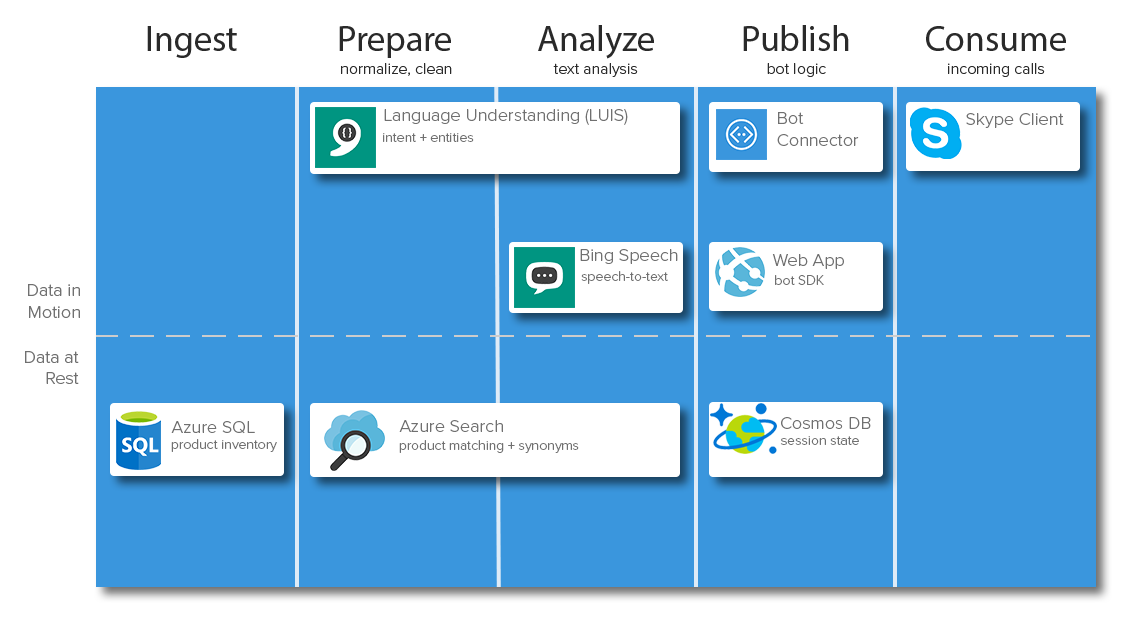
<style>
.page{position:relative;width:1139px;height:630px;background:#3a96dd}
.page>*{position:absolute;margin:0}
.t1{font:36px "MyriadPro-Regular";color:#2a2a2a}
.t2{font:16px "ProximaNova-Light";color:#2a2a2a}
.t3{font:18px "ProximaNova-Light";color:#707070}
.t4{font:14px "ProximaNova-Light";color:#707070}
</style>
<div class="page">
<p class="t1" style="left:147px;top:26px;width:90px;height:32px">Ingest</p>
<p class="t1" style="left:339px;top:26px;width:112px;height:32px">Prepare</p>
<p class="t1" style="left:538px;top:25px;width:116px;height:34px">Analyze</p>
<p class="t1" style="left:743px;top:25px;width:106px;height:26px">Publish</p>
<p class="t1" style="left:926px;top:26px;width:140px;height:25px">Consume</p>
<p class="t2" style="left:341px;top:63px;width:111px;height:13px">normalize, clean</p>
<p class="t2" style="left:553px;top:63px;width:85px;height:14px">text analysis</p>
<p class="t2" style="left:767px;top:63px;width:59px;height:14px">bot logic</p>
<p class="t2" style="left:948px;top:63px;width:97px;height:14px">incoming calls</p>
<p class="t3" style="left:384px;top:109px;width:244px;height:16px">Language Understanding (LUIS)</p>
<p class="t3" style="left:777px;top:112px;width:82px;height:34px">Bot<br>Connector</p>
<p class="t3" style="left:966px;top:113px;width:98px;height:15px">Skype Client</p>
<p class="t4" style="left:383px;top:133px;width:91px;height:9px">intent + entities</p>
<p class="t3" style="left:580px;top:249px;width:98px;height:15px">Bing Speech</p>
<p class="t3" style="left:772px;top:254px;width:72px;height:15px">Web App</p>
<p class="t4" style="left:581px;top:271px;width:87px;height:13px">speech-to-text</p>
<p class="t4" style="left:775px;top:275px;width:49px;height:10px">bot SDK</p>
<p class="t3" style="left:28px;top:284px;width:52px;height:34px;text-align:right">Data in<br>Motion</p>
<p class="t3" style="left:25px;top:351px;width:54px;height:33px;text-align:right">Data at<br>Rest</p>
<p class="t3" style="left:171px;top:421px;width:84px;height:13px">Azure SQL</p>
<p class="t3" style="left:399px;top:420px;width:104px;height:12px">Azure Search</p>
<p class="t3" style="left:781px;top:417px;width:90px;height:12px">Cosmos DB</p>
<p class="t4" style="left:780px;top:436px;width:79px;height:9px">session state</p>
<p class="t4" style="left:171px;top:439px;width:106px;height:13px">product inventory</p>
<p class="t4" style="left:399px;top:440px;width:180px;height:13px">product matching + synonyms</p>
</div>
